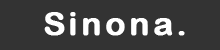
<style>
.page{position:relative;width:220px;height:50px;background:#333333}
.page>*{position:absolute;margin:0}
.t1{font:31.9px "ArialRoundedMTBold";letter-spacing:0.1em;color:#ffffff;font-weight:bold}
</style>
<div class="page">
<p class="t1" style="left:44px;top:12px;width:141px;height:24px">Sinona.</p>
</div>
